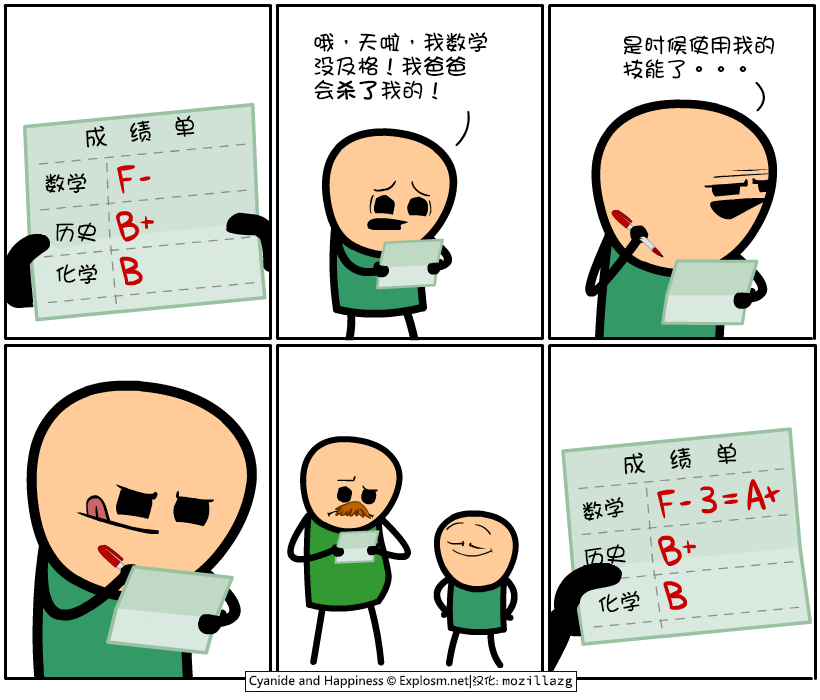
<style>
.page{position:relative;width:820px;height:700px;background:#ffffff}
.page>*{position:absolute;margin:0}
.t1{font:22px/24px "DFGirl";color:#000000}
.t2{font:22px/24px "DFGirl";color:#000000;font-weight:bold}
.t3{font:24px "DFGirl";letter-spacing:0.86em;color:#000000}
.t4{font:22px "DFGirl";color:#000000}
.t5{font:24px "DFGirl";letter-spacing:0.94em;color:#000000}
</style>
<div class="page">
<p class="t1" style="left:314px;top:32px;width:174px;height:68px">哦，天啦，我数学<br>没及格！我爸爸<br>会<span class="t2">杀了</span>我的！</p>
<p class="t1" style="left:623px;top:35px;width:151px;height:44px">是时候使用我的<br>技能了。。。</p>
<p class="t3" style="left:86px;top:115px;width:109px;height:33px;rotate:-7deg">成绩单</p>
<p class="t4" style="left:45px;top:173px;width:42px;height:20px">数学</p>
<p class="t4" style="left:56px;top:222px;width:40px;height:20px">历史</p>
<p class="t4" style="left:56px;top:264px;width:42px;height:20px">化学</p>
<p class="t5" style="left:624px;top:442px;width:113px;height:33px;rotate:-6deg">成绩单</p>
<p class="t4" style="left:582px;top:497px;width:42px;height:24px;rotate:-8deg">数学</p>
<p class="t4" style="left:584px;top:544px;width:42px;height:24px;rotate:-8deg">历史</p>
<p class="t4" style="left:598px;top:590px;width:42px;height:22px;rotate:-6deg">化学</p>
</div>
